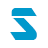
<style>
.page{position:relative;width:48px;height:48px;background:#ffffff}
.page>*{position:absolute;margin:0}
.t1{font:50.1px "ARDESTINE";color:#0099cc}
</style>
<div class="page">
<p class="t1" style="left:10px;top:8px;width:27px;height:32px">S</p>
<p class="t1" style="left:10px;top:8px;width:27px;height:32px">S</p>
</div>
